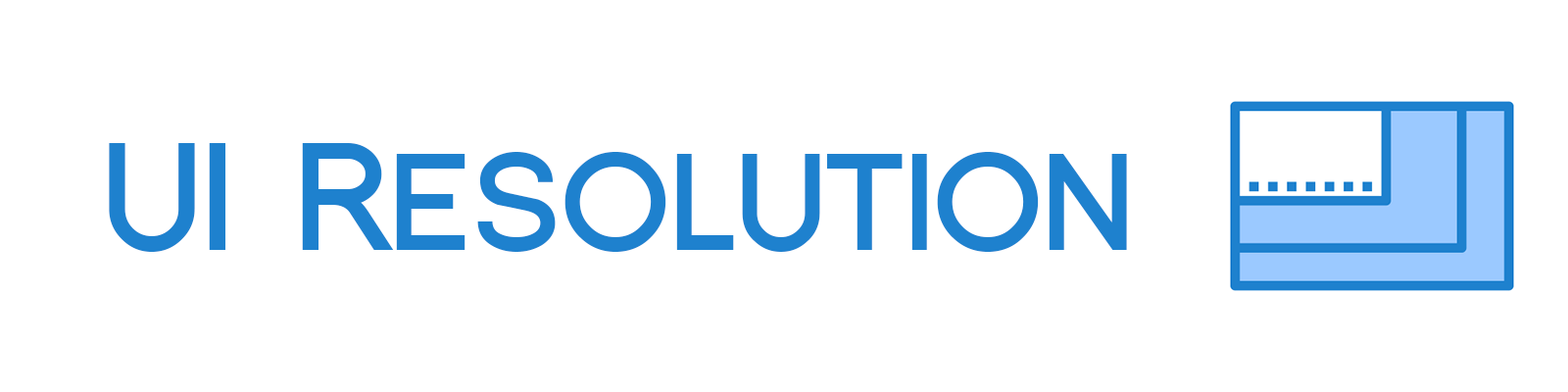
<style>
.page{position:relative;width:1568px;height:392px;background:#ffffff}
.page>*{position:absolute;margin:0}
.t1{font:147px "FlorencesansSC-Bold";letter-spacing:-0.02em;color:#1e81ce}
</style>
<div class="page">
<p class="t1" style="left:109px;top:143px;width:1018px;height:109px">UI Resolution</p>
</div>
